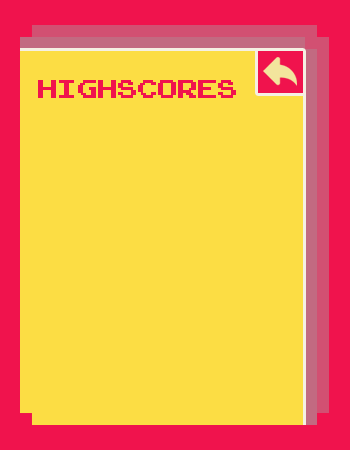
<style>
.page{position:relative;width:350px;height:450px;background:#fcdd44}
.page>*{position:absolute;margin:0}
.t1{font:36px "ArcadeClassic";color:#f0134d}
</style>
<div class="page">
<p class="t1" style="left:38px;top:80px;width:198px;height:18px">HIGHSCORES</p>
</div>
